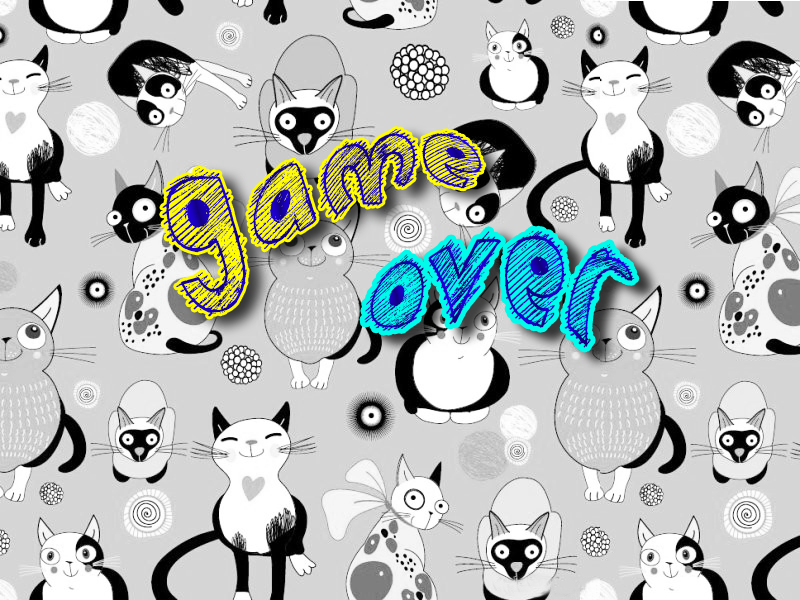
<style>
.page{position:relative;width:800px;height:600px;background:#d5d5d5}
.page>*{position:absolute;margin:0}
.t1{font:150px "Childs-Play"}
</style>
<div class="page">
<p class="t1" style="left:162px;top:129px;width:322px;height:188px;rotate:-6deg">Game</p>
<p class="t1" style="left:364px;top:230px;width:271px;height:118px">Over</p>
</div>
